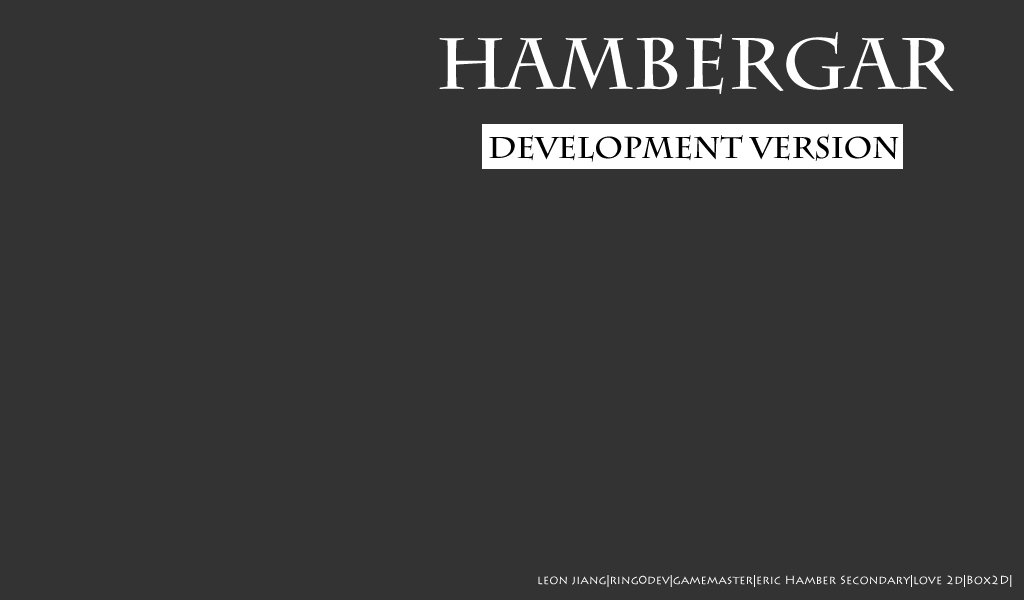
<style>
.page{position:relative;width:1024px;height:600px;background:#333333}
.page>*{position:absolute;margin:0}
.t1{font:72px "CharlemagneStd-Bold";color:#ffffff}
.t2{font:30px "CharlemagneStd-Bold";color:#000000}
.t3{font:12px "LithosPro-Regular";color:#ffffff}
</style>
<div class="page">
<p class="t1" style="left:439px;top:32px;width:515px;height:62px">hambergar</p>
<p class="t2" style="left:489px;top:134px;width:410px;height:28px">development version</p>
<p class="t3" style="left:538px;top:575px;width:474px;height:12px">leon jiang|ring0dev|gamemaster|eric Hamber Secondary|love 2d|Box2D|</p>
</div>
